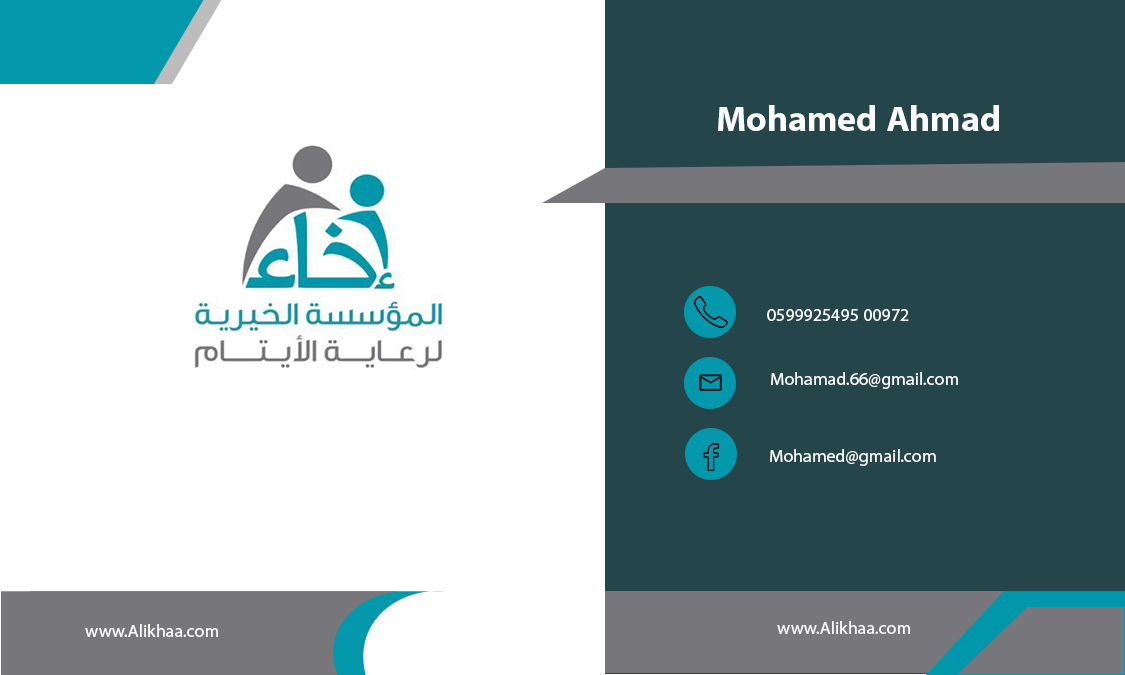
<style>
.page{position:relative;width:1125px;height:675px;background:#ffffff}
.page>*{position:absolute;margin:0}
.t1{font:50px "MyriadArabic-Bold";color:#fcfbfb}
.t2{font:25px "MyriadArabic-Regular";color:#fcfbfb}
.t3{font:25px "MyriadArabic-Regular";color:#ffffff}
</style>
<div class="page">
<p class="t1" style="left:718px;top:105px;width:281px;height:26px">Mohamed Ahmad</p>
<p class="t2" style="left:767px;top:309px;width:142px;height:12px">00972 0599925495</p>
<p class="t2" style="left:771px;top:372px;width:187px;height:17px">Mohamad.66@gmail.com</p>
<p class="t2" style="left:770px;top:449px;width:166px;height:17px">Mohamed@gmail.com</p>
<p class="t3" style="left:85px;top:624px;width:133px;height:13px">www.Alikhaa.com</p>
<p class="t2" style="left:777px;top:621px;width:133px;height:13px">www.Alikhaa.com</p>
</div>
